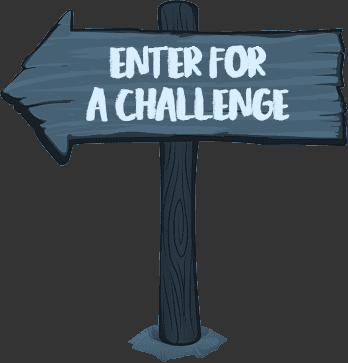
<style>
.page{position:relative;width:348px;height:363px;background:#333333}
.page>*{position:absolute;margin:0}
.t1{font:72px/42px "TropicalAsianDEMO-Regular";letter-spacing:-0.05em;color:#d8efff}
</style>
<div class="page">
<p class="t1" style="left:86px;top:45px;width:204px;height:77px;text-align:center">ENTER FOR<br>A CHALLENGE</p>
</div>
